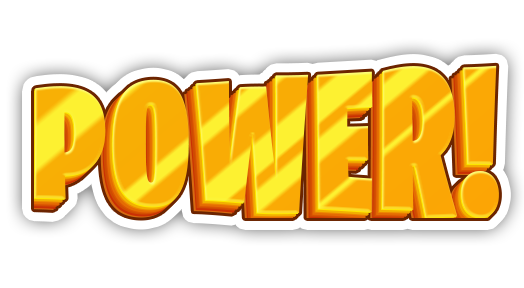
<style>
.page{position:relative;width:524px;height:288px;background:#ffffff}
.page>*{position:absolute;margin:0}
.t1{font:187.5px "BurbankBigCondensed-Black";letter-spacing:0.03em;scale:0.89 1}
</style>
<div class="page">
<p class="t1" style="left:34px;top:65px;width:465px;height:153px">POWER!</p>
</div>
